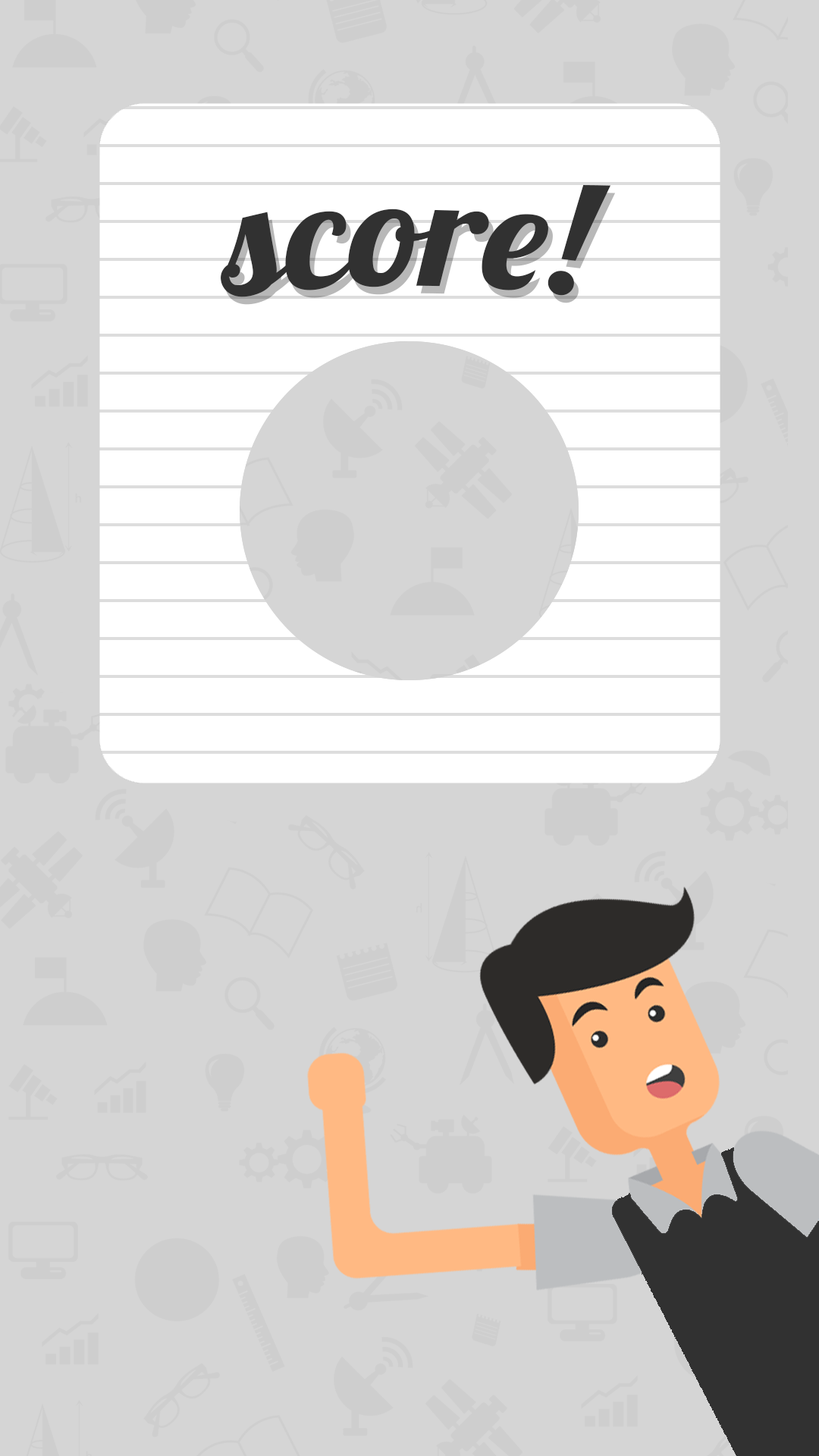
<style>
.page{position:relative;width:819px;height:1456px;background:#d5d5d5}
.page>*{position:absolute;margin:0}
.t1{font:151.7px "Lobster-Regular";color:#313131}
</style>
<div class="page">
<p class="t1" style="left:221px;top:185px;width:390px;height:112px">score!</p>
</div>
